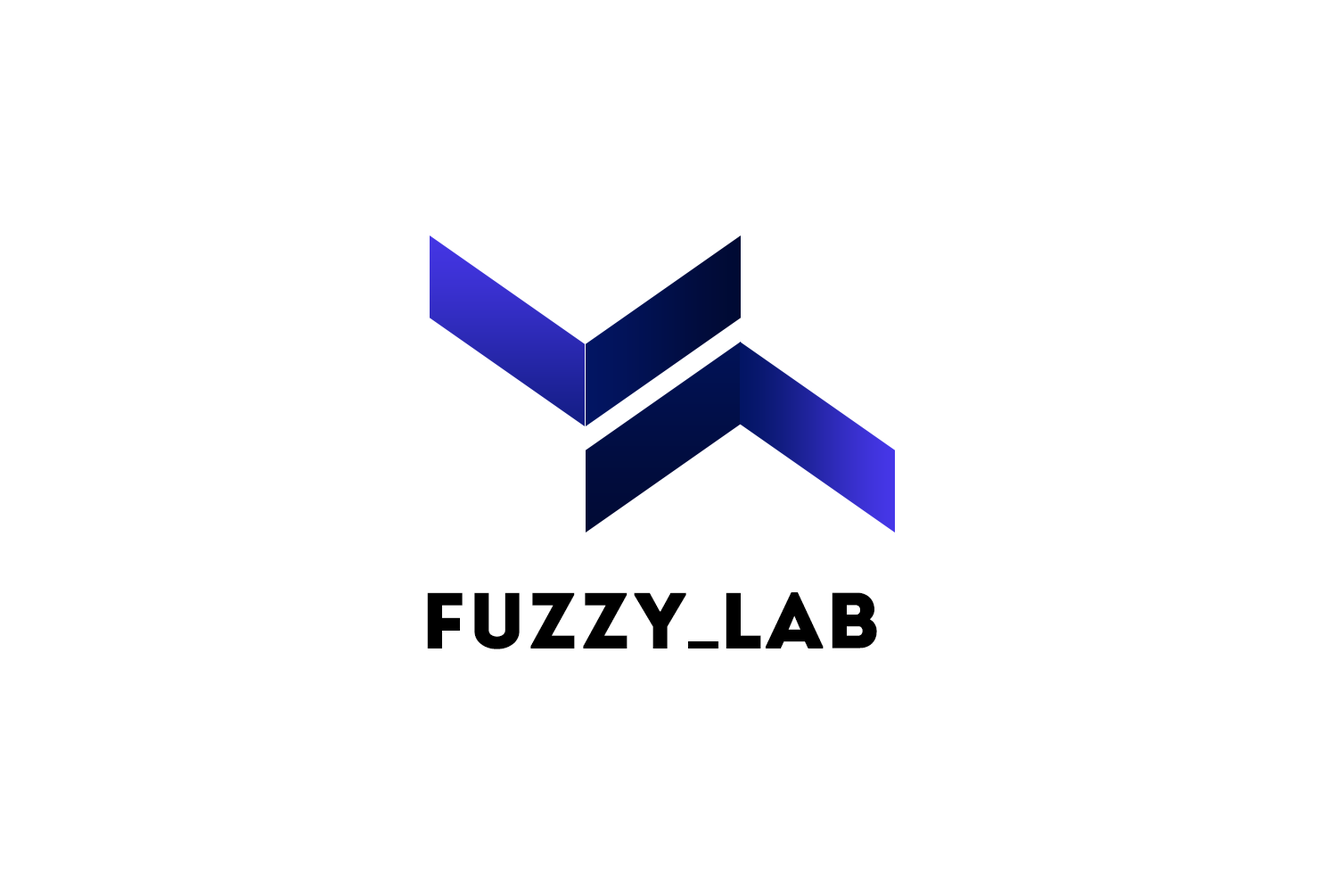
<style>
.page{position:relative;width:1337px;height:892px;background:#ffffff}
.page>*{position:absolute;margin:0}
.t1{font:79.4px "Intro-Black";letter-spacing:0.05em;color:#000000}
</style>
<div class="page">
<p class="t1" style="left:427px;top:592px;width:260px;height:57px">FUZZY</p>
<p class="t1" style="left:726px;top:592px;width:151px;height:56px">LAB</p>
</div>
